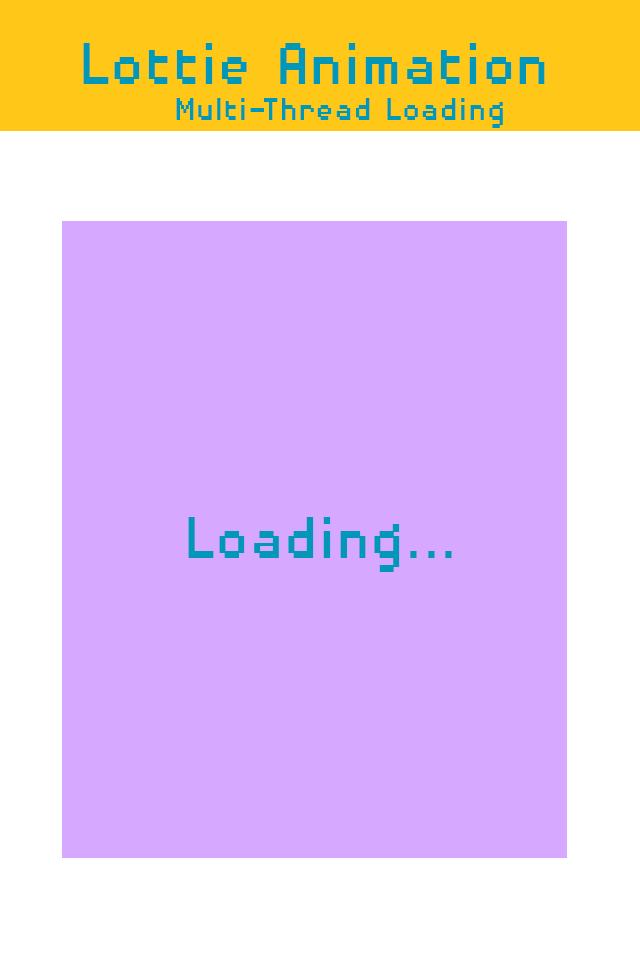
<style>
.page{position:relative;width:640px;height:960px;background:#d6a8ff}
.page>*{position:absolute;margin:0}
.t1{font:76.6px "DisposableDroidBB";color:#0097b8;scale:0.91 1}
.t2{font:41.7px "DisposableDroidBB";color:#0097b8;scale:0.91 1}
</style>
<div class="page">
<p class="t1" style="left:83px;top:43px;width:462px;height:41px">Lottie Animation</p>
<p class="t2" style="left:176px;top:98px;width:327px;height:30px">Multi-Thread Loading</p>
</div>
